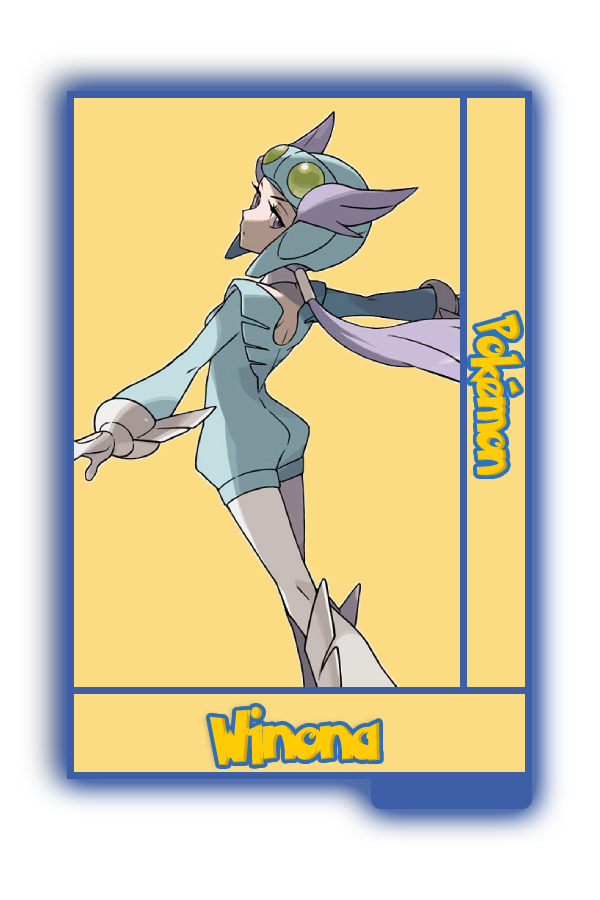
<style>
.page{position:relative;width:600px;height:900px;background:#fbdc83}
.page>*{position:absolute;margin:0}
.t1{font:48.8px "PokemonSolidNormal";color:#ffcb05;scale:0.8 1}
.t2{font:56.6px "PokemonSolidNormal";color:#ffcb05;scale:0.92 1}
</style>
<div class="page">
<p class="t1" style="left:469px;top:313px;width:54px;height:163px;rotate:90deg">Pokémon</p>
<p class="t2" style="left:209px;top:706px;width:171px;height:60px">Winona</p>
</div>
